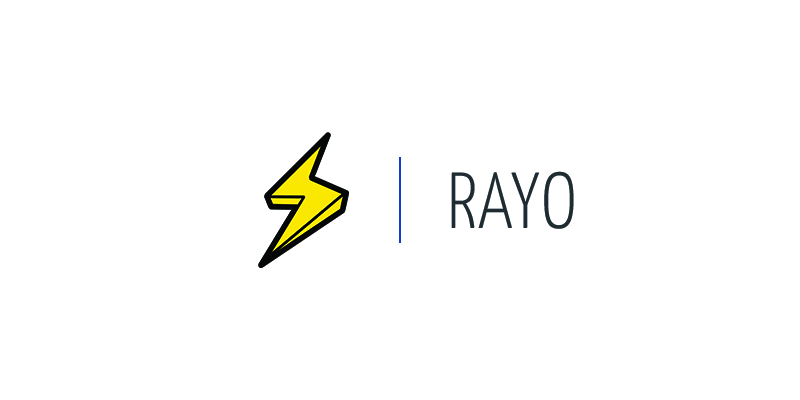
<style>
.page{position:relative;width:800px;height:400px;background:#ffffff}
.page>*{position:absolute;margin:0}
.t1{font:79.2px "YanoneKaffeesatz-Light";letter-spacing:0.02em;color:#1e2b31}
</style>
<div class="page">
<p class="t1" style="left:451px;top:171px;width:123px;height:58px">RAYO</p>
</div>
